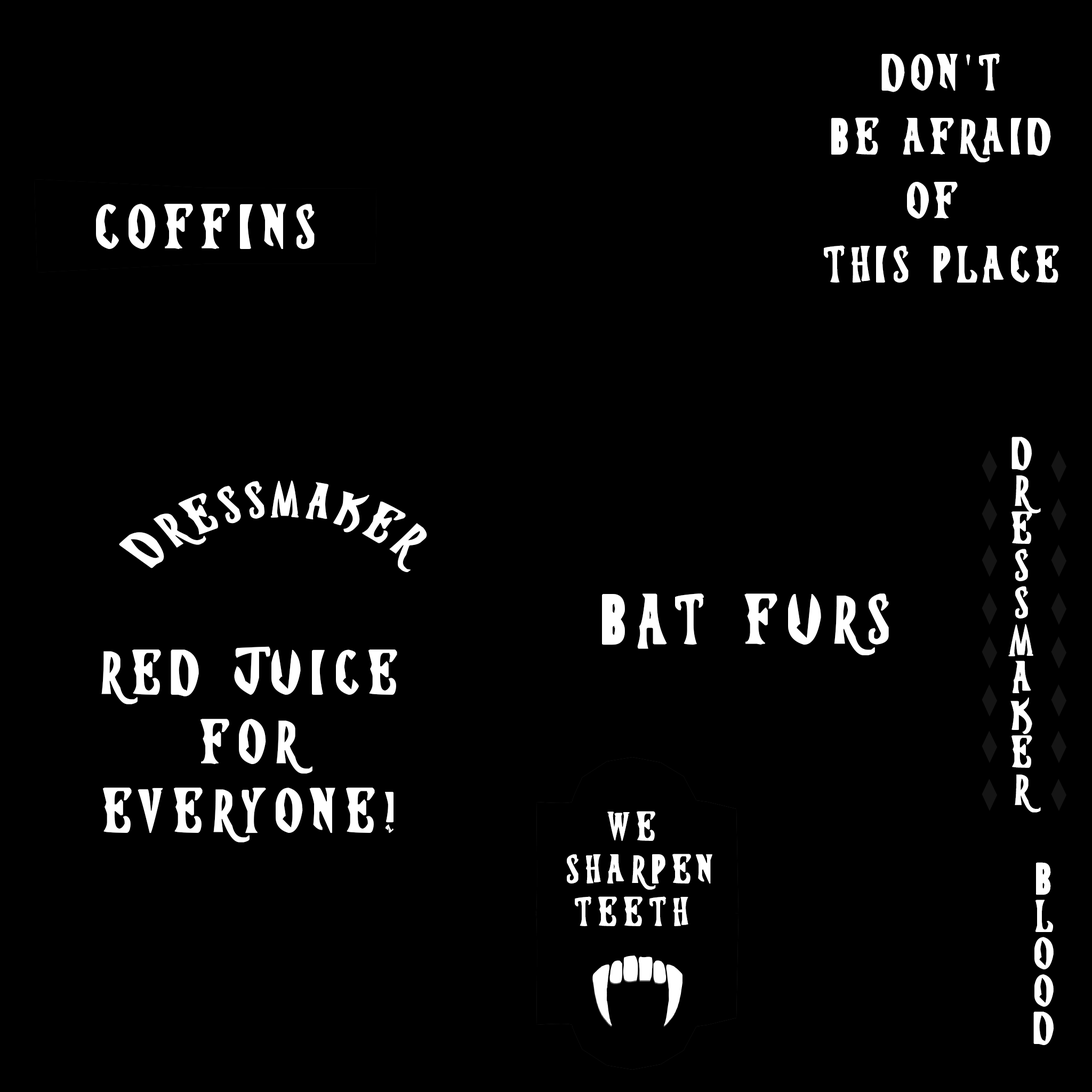
<style>
.page{position:relative;width:1092px;height:1092px;background:#000000}
.page>*{position:absolute;margin:0}
.t1{font:47.1px/64px "hosteltransilvania";letter-spacing:0.15em;color:#ffffff}
.t2{font:57.6px "hosteltransilvania";letter-spacing:0.2em;color:#ffffff}
.t3{font:41.3px/37.4px "hosteltransilvania";color:#ffffff}
.t4{font:41.6px "hosteltransilvania";letter-spacing:0.2em;color:#ffffff}
.t5{font:65.1px "hosteltransilvania";letter-spacing:0.2em;color:#ffffff}
.t6{font:37.5px/42.7px "hosteltransilvania";letter-spacing:0.2em;color:#ffffff}
</style>
<div class="page">
<p class="t1" style="left:824px;top:53px;width:235px;height:230px;text-align:center">don't<br>be afraid<br>of <br>this place</p>
<p class="t2" style="left:96px;top:204px;width:219px;height:45px">coffins</p>
<p class="t3" style="left:1008px;top:437px;width:33px;height:376px;text-align:center">d<br>r<br>e<br>s<br>s<br>m<br>a<br>k<br>e<br>r</p>
<p class="t4" style="left:119px;top:480px;width:308px;height:92px;text-align:center">dressmaker</p>
<p class="t5" style="left:602px;top:593px;width:287px;height:62px">BAT FURS</p>
<p class="t2" style="left:101px;top:646px;width:296px;height:196px;text-align:center">red juice<br>for<br>everyone!</p>
<p class="t6" style="left:567px;top:811px;width:145px;height:115px;text-align:center">we <br>sharpen<br>teeth</p>
<p class="t3" style="left:1033px;top:862px;width:21px;height:183px;text-align:center">b<br>l<br>o<br>o<br>d</p>
</div>
